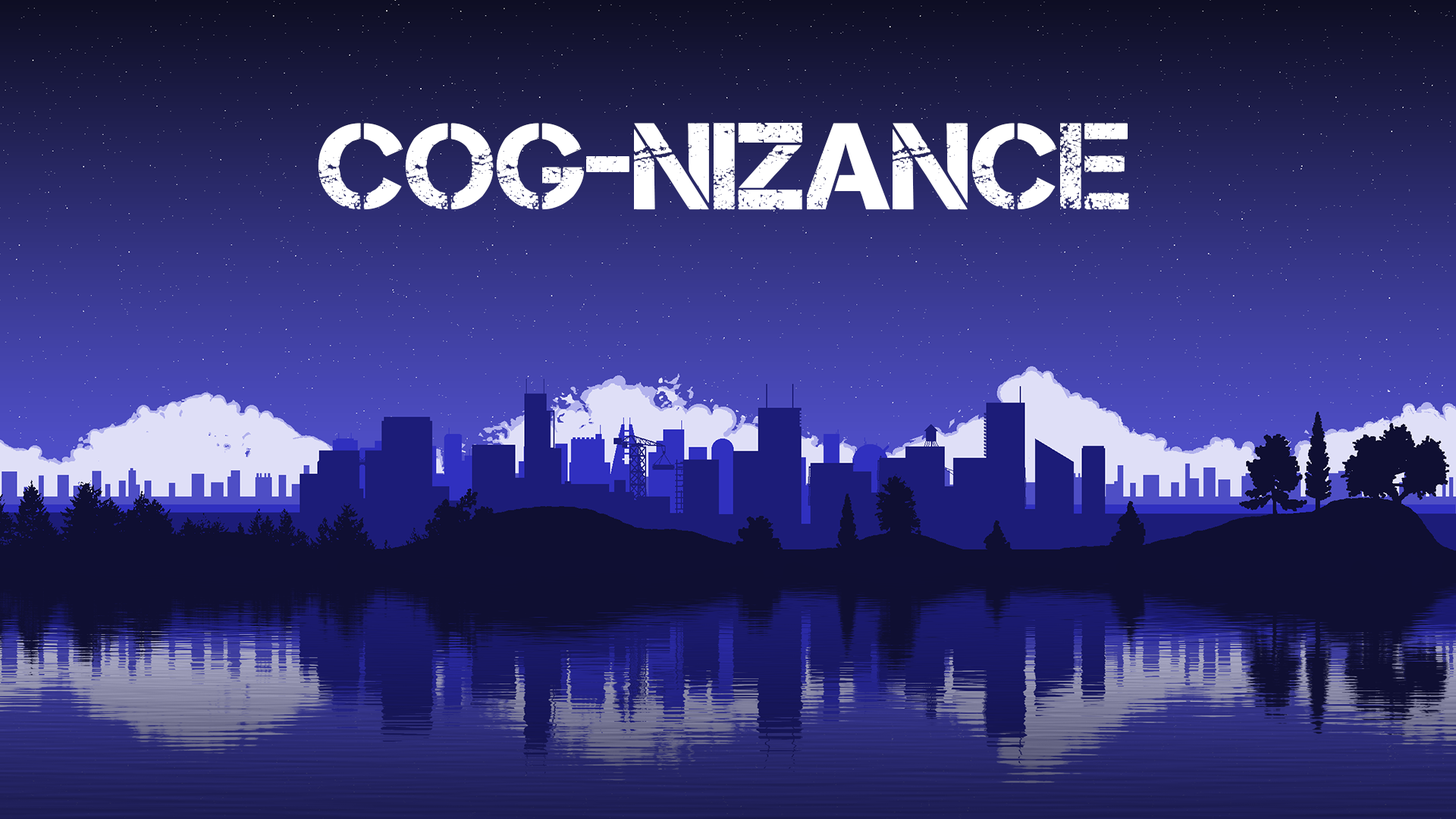
<style>
.page{position:relative;width:1456px;height:819px}
.page>*{position:absolute;margin:0}
.t1{font:122.8px "Captureit";color:#ffffff;scale:1.07 1}
</style>
<div class="page">
<p class="t1" style="left:318px;top:123px;width:811px;height:87px">cog-nizance</p>
</div>
